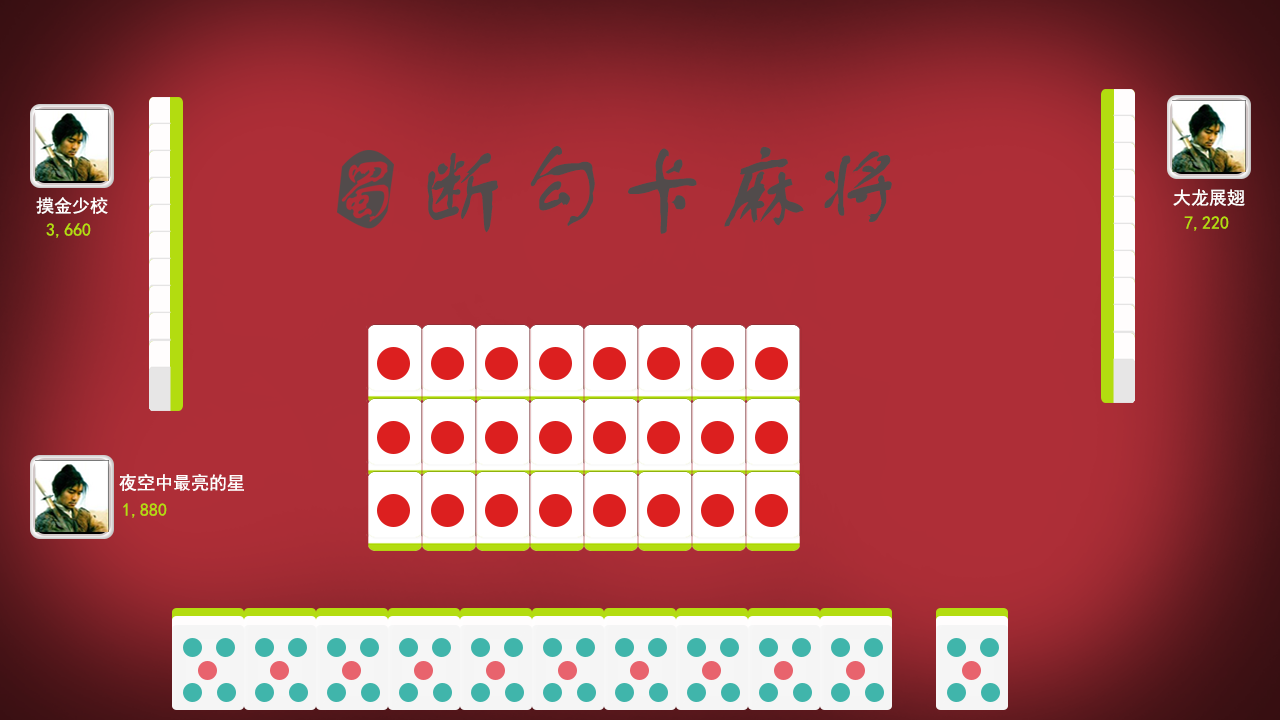
<style>
.page{position:relative;width:1280px;height:720px}
.page>*{position:absolute;margin:0}
.t1{font:100px "FZSTK--GBK1-0";color:#514b4b}
.t2{font:18px "SimHei";color:#fffdfd}
.t3{font:18px "SimHei";color:#b3dc10}
</style>
<div class="page">
<p class="t1" style="left:427px;top:146px;width:465px;height:88px">断勾卡麻将</p>
<p class="t2" style="left:36px;top:197px;width:72px;height:17px">摸金少校</p>
<p class="t2" style="left:1173px;top:189px;width:72px;height:17px">大龙展翅</p>
<p class="t3" style="left:1184px;top:216px;width:45px;height:15px">7,220</p>
<p class="t3" style="left:46px;top:223px;width:45px;height:15px">3,660</p>
<p class="t2" style="left:119px;top:474px;width:125px;height:17px">夜空中最亮的星</p>
<p class="t3" style="left:123px;top:503px;width:44px;height:15px">1,880</p>
</div>
